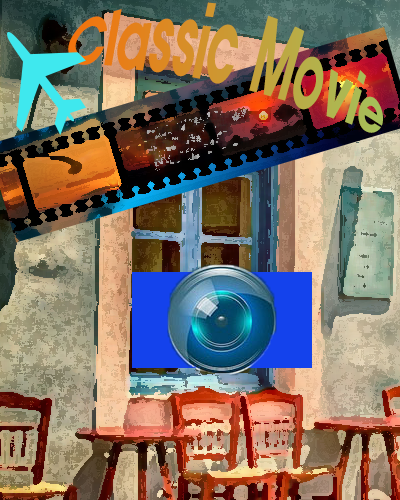
<style>
.page{position:relative;width:400px;height:500px}
.page>*{position:absolute;margin:0}
.t1{font:50px "HaanYHeadB"}
</style>
<div class="page">
<p class="t1" style="left:68px;top:2px;width:315px;height:131px;rotate:13deg">Classic Movie</p>
</div>
